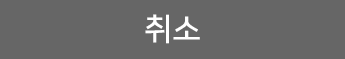
<style>
.page{position:relative;width:345px;height:59px;background:#666666}
.page>*{position:absolute;margin:0}
.t1{font:31px "NanumSquareB";color:#ffffff}
</style>
<div class="page">
<p class="t1" style="left:145px;top:14px;width:55px;height:30px">취소</p>
</div>
